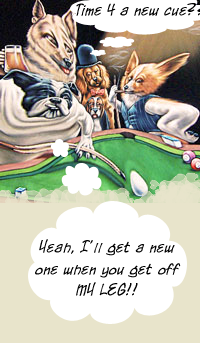
<style>
.page{position:relative;width:200px;height:343px;background:#ffffff}
.page>*{position:absolute;margin:0}
.t1{font:17.9px "ChroniclesofaHero";color:#000000}
</style>
<div class="page">
<p class="t1" style="left:35px;top:239px;width:146px;height:57px;text-align:center">Yeah, I’ll get a new<br> one when you get off <br>MY LEG!!</p>
</div>
